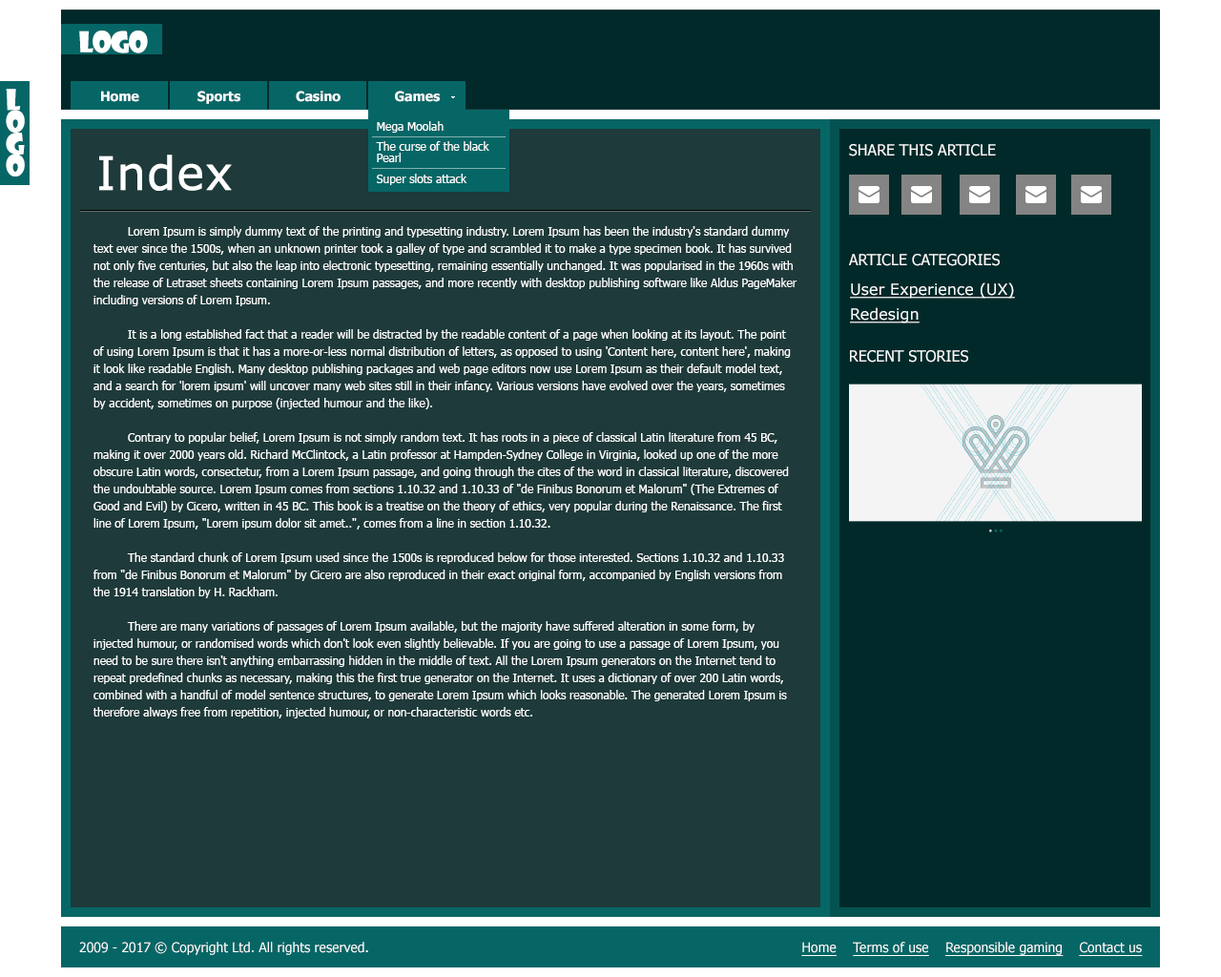
<style>
.page{position:relative;width:1221px;height:977px;background:#1e3a3a}
.page>*{position:absolute;margin:0}
.t1{font:28px "ShowcardGothic-Reg";letter-spacing:-0.04em;color:#ffffff;text-transform:uppercase}
.t2{font:28px/21.9px "ShowcardGothic-Reg";letter-spacing:-0.04em;color:#ffffff;text-transform:uppercase}
.t3{font:13.4px "Tahoma-Bold";color:#ffffff}
.t4{font:11.4px "Tahoma";color:#ffffff}
.t5{font:11.4px/11.4px "Tahoma";color:#ffffff}
.t6{font:15.3px "Tahoma";color:#ffffff;text-transform:uppercase}
.t7{font:45.8px "Verdana";color:#ffffff;font-weight:bold}
.t8{font:11.4px/17.2px "Tahoma";color:#ffffff}
.t9{font:15.3px/20px "Verdana";color:#ffffff;text-decoration:underline}
.t10{font:13.4px "Tahoma";color:#ffffff}
.t11{font:13.4px "Tahoma";color:#ffffff;text-decoration:underline}
</style>
<div class="page">
<p class="t1" style="left:79px;top:31px;width:69px;height:22px">Logo</p>
<p class="t2" style="left:6px;top:89px;width:19px;height:87px">L<br>o<br>g<br>o</p>
<p class="t3" style="left:101px;top:91px;width:38px;height:11px">Home</p>
<p class="t3" style="left:197px;top:91px;width:43px;height:13px">Sports</p>
<p class="t3" style="left:296px;top:91px;width:45px;height:11px">Casino</p>
<p class="t3" style="left:395px;top:91px;width:45px;height:11px">Games</p>
<p class="t3" style="left:395px;top:91px;width:45px;height:11px">Games</p>
<p class="t4" style="left:377px;top:121px;width:67px;height:12px">Mega Moolah</p>
<p class="t5" style="left:376px;top:141px;width:113px;height:21px">The curse of the black<br>Pearl</p>
<p class="t6" style="left:849px;top:144px;width:147px;height:12px">share this article</p>
<p class="t7" style="left:99px;top:155px;width:133px;height:36px">Index</p>
<p class="t4" style="left:377px;top:174px;width:90px;height:11px">Super slots attack</p>
<p class="t8" style="left:93px;top:226px;width:704px;height:492px">Lorem Ipsum is simply dummy text of the printing and typesetting industry. Lorem Ipsum has been the industry's standard dummy text ever since the 1500s, when an unknown printer took a galley of type and scrambled it to make a type specimen book. It has survived not only five centuries, but also the leap into electronic typesetting, remaining essentially unchanged. It was popularised in the 1960s with the release of Letraset sheets containing Lorem Ipsum passages, and more recently with desktop publishing software like Aldus PageMaker including versions of Lorem Ipsum.<br><br> It is a long established fact that a reader will be distracted by the readable content of a page when looking at its layout. The point of using Lorem Ipsum is that it has a more-or-less normal distribution of letters, as opposed to using 'Content here, content here', making it look like readable English. Many desktop publishing packages and web page editors now use Lorem Ipsum as their default model text, and a search for 'lorem ipsum' will uncover many web sites still in their infancy. Various versions have evolved over the years, sometimes by accident, sometimes on purpose (injected humour and the like).<br> <br> Contrary to popular belief, Lorem Ipsum is not simply random text. It has roots in a piece of classical Latin literature from 45 BC, making it over 2000 years old. Richard McClintock, a Latin professor at Hampden-Sydney College in Virginia, looked up one of the more obscure Latin words, consectetur, from a Lorem Ipsum passage, and going through the cites of the word in classical literature, discovered the undoubtable source. Lorem Ipsum comes from sections 1.10.32 and 1.10.33 of "de Finibus Bonorum et Malorum" (The Extremes of Good and Evil) by Cicero, written in 45 BC. This book is a treatise on the theory of ethics, very popular during the Renaissance. The first line of Lorem Ipsum, "Lorem ipsum dolor sit amet..", comes from a line in section 1.10.32.<br><br> The standard chunk of Lorem Ipsum used since the 1500s is reproduced below for those interested. Sections 1.10.32 and 1.10.33 from "de Finibus Bonorum et Malorum" by Cicero are also reproduced in their exact original form, accompanied by English versions from the 1914 translation by H. Rackham.<br><br> There are many variations of passages of Lorem Ipsum available, but the majority have suffered alteration in some form, by injected humour, or randomised words which don't look even slightly believable. If you are going to use a passage of Lorem Ipsum, you need to be sure there isn't anything embarrassing hidden in the middle of text. All the Lorem Ipsum generators on the Internet tend to repeat predefined chunks as necessary, making this the first true generator on the Internet. It uses a dictionary of over 200 Latin words, combined with a handful of model sentence structures, to generate Lorem Ipsum which looks reasonable. The generated Lorem Ipsum is therefore always free from repetition, injected humour, or non-characteristic words etc.</p>
<p class="t6" style="left:849px;top:254px;width:151px;height:12px">article categories</p>
<p class="t9" style="left:850px;top:282px;width:165px;height:41px">User Experience (UX)<br>Redesign</p>
<p class="t6" style="left:850px;top:350px;width:118px;height:12px">Recent Stories</p>
<p class="t10" style="left:79px;top:941px;width:289px;height:14px">2009 - 2017 © Copyright Ltd. All rights reserved.</p>
<p class="t11" style="left:801px;top:941px;width:342px;height:15px">Home    Terms of use    Responsible gaming    Contact us</p>
</div>
